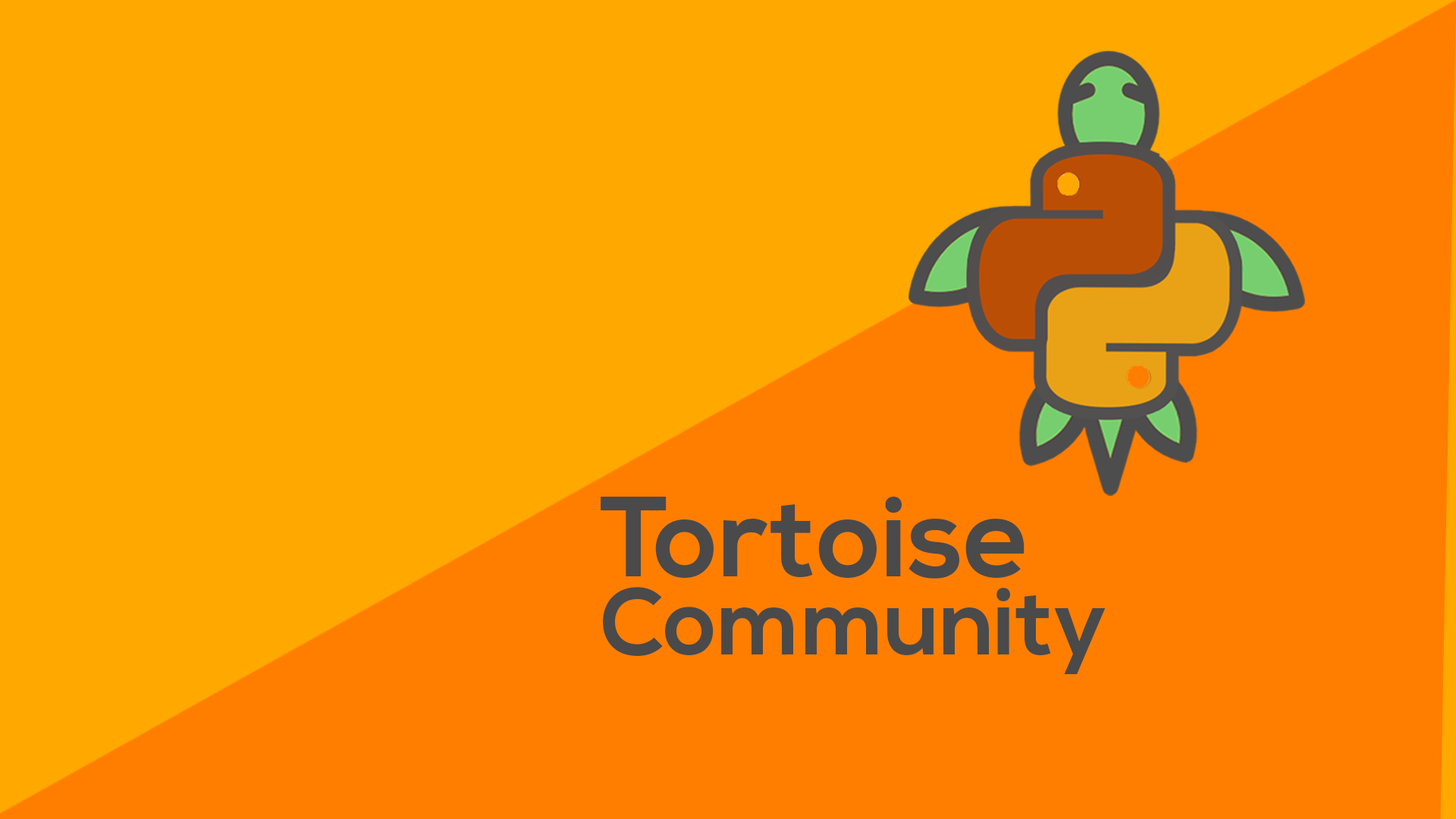
<style>
.page{position:relative;width:1456px;height:819px;background:#ffa800}
.page>*{position:absolute;margin:0}
.t1{font:113.4px "NexaBold";color:#4a4a4a}
.t2{font:94.1px "NexaBold";color:#4a4a4a}
</style>
<div class="page">
<p class="t1" style="left:601px;top:496px;width:423px;height:83px">Tortoise</p>
<p class="t2" style="left:603px;top:587px;width:503px;height:87px">Community</p>
</div>
